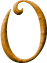
<style>
.page{position:relative;width:47px;height:63px;background:#ffffff}
.page>*{position:absolute;margin:0}
.t1{font:100px "Harrington"}
</style>
<div class="page">
<p class="t1" style="left:0px;top:0px;width:47px;height:63px">0</p>
</div>
